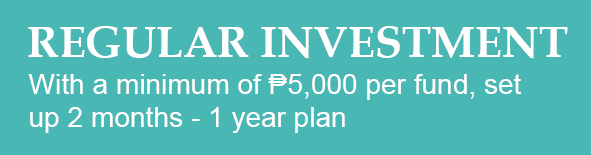
<style>
.page{position:relative;width:591px;height:155px;background:#49b8b4}
.page>*{position:absolute;margin:0}
.t1{font:44px "BookAntiqua-Bold";color:#ffffff}
.t2{font:28.1px "ArialMT";color:#ffffff}
</style>
<div class="page">
<p class="t1" style="left:28px;top:26px;width:540px;height:33px">REGULAR INVESTMENT</p>
<p class="t2" style="left:28px;top:74px;width:493px;height:59px">With a minimum of ₱5,000 per fund, set<br>up 2 months - 1 year plan</p>
</div>
